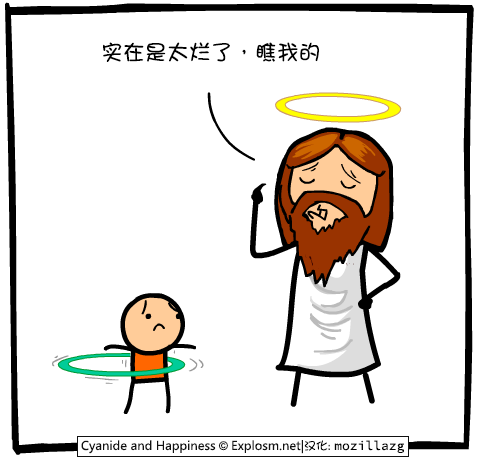
<style>
.page{position:relative;width:480px;height:460px;background:#ffffff}
.page>*{position:absolute;margin:0}
.t1{font:22px "DFGirl";color:#000000}
</style>
<div class="page">
<p class="t1" style="left:103px;top:42px;width:216px;height:20px">实在是太烂了，瞧我的</p>
</div>
